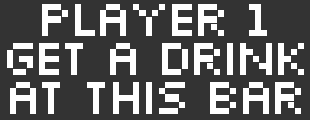
<style>
.page{position:relative;width:310px;height:120px;background:#333333}
.page>*{position:absolute;margin:0}
.t1{font:54px/39px "Silkscreen";letter-spacing:-0.12em;color:#ffffff}
</style>
<div class="page">
<p class="t1" style="left:7px;top:4px;width:297px;height:110px;text-align:center">Player 1<br>Get a drink<br>at this bar</p>
</div>
